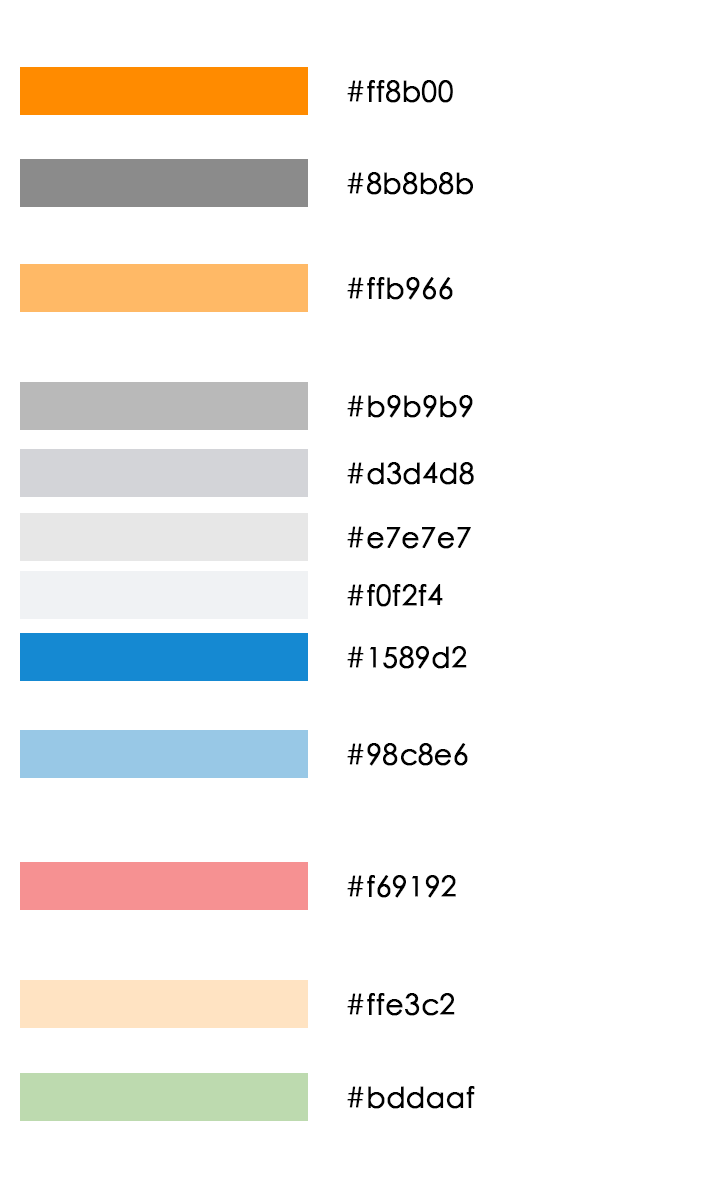
<style>
.page{position:relative;width:720px;height:1184px;background:#ffffff}
.page>*{position:absolute;margin:0}
.t1{font:28px "STXihei";color:#000000;font-weight:bold}
</style>
<div class="page">
<p class="t1" style="left:347px;top:80px;width:106px;height:23px">#ff8b00</p>
<p class="t1" style="left:347px;top:172px;width:126px;height:23px">#8b8b8b</p>
<p class="t1" style="left:347px;top:277px;width:106px;height:23px">#ffb966</p>
<p class="t1" style="left:347px;top:395px;width:126px;height:23px">#b9b9b9</p>
<p class="t1" style="left:347px;top:462px;width:127px;height:23px">#d3d4d8</p>
<p class="t1" style="left:347px;top:526px;width:124px;height:23px">#e7e7e7</p>
<p class="t1" style="left:347px;top:584px;width:96px;height:23px">#f0f2f4</p>
<p class="t1" style="left:347px;top:646px;width:120px;height:23px">#1589d2</p>
<p class="t1" style="left:347px;top:743px;width:121px;height:23px">#98c8e6</p>
<p class="t1" style="left:347px;top:875px;width:109px;height:23px">#f69192</p>
<p class="t1" style="left:347px;top:993px;width:108px;height:23px">#ffe3c2</p>
<p class="t1" style="left:347px;top:1086px;width:128px;height:23px">#bddaaf</p>
</div>
